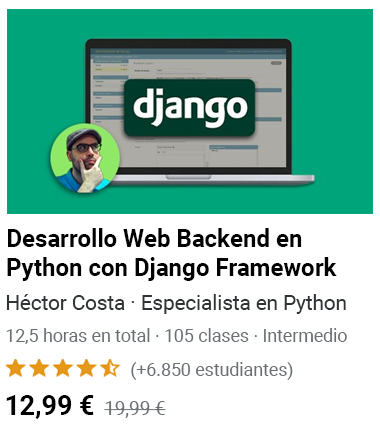
<style>
.page{position:relative;width:380px;height:425px;background:#ffffff}
.page>*{position:absolute;margin:0}
.t1{font:24.7px/28.8px "Roboto-Bold";color:#000000}
.t2{font:20.9px "Roboto-Regular";color:#303335}
.t3{font:18.3px "Roboto-Regular";color:#6a6f73;scale:0.97 1}
.t4{font:18.2px "Roboto-Regular";color:#6a6f73}
.t5{font:27.7px "Roboto-Bold";color:#000000;scale:0.97 1}
.t6{font:19.4px "Roboto-Regular";color:#6a6f73}
</style>
<div class="page">
<p class="t1" style="left:7px;top:228px;width:330px;height:53px">Desarrollo Web Backend en Python con Django Framework</p>
<p class="t2" style="left:6px;top:294px;width:340px;height:20px">Héctor Costa · Especialista en Python</p>
<p class="t3" style="left:6px;top:328px;width:341px;height:16px">12,5 horas en total · 105 clases · Intermedio</p>
<p class="t4" style="left:131px;top:362px;width:162px;height:18px">(+6.850 estudiantes)</p>
<p class="t5" style="left:6px;top:395px;width:88px;height:24px">12,99 €</p>
<p class="t6" style="left:104px;top:401px;width:62px;height:17px">19,99 €</p>
</div>
